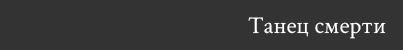
<style>
.page{position:relative;width:403px;height:50px;background:#333333}
.page>*{position:absolute;margin:0}
.t1{font:24px "CrimsonText-Regular";color:#ffffff}
</style>
<div class="page">
<p class="t1" style="left:248px;top:17px;width:138px;height:22px">Танец смерти</p>
</div>
